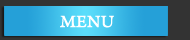
<style>
.page{position:relative;width:190px;height:40px;background:#333333}
.page>*{position:absolute;margin:0}
.t1{font:18px "ArnoPro-Caption";color:#ffffff}
</style>
<div class="page">
<p class="t1" style="left:60px;top:15px;width:54px;height:13px">MENU</p>
</div>
